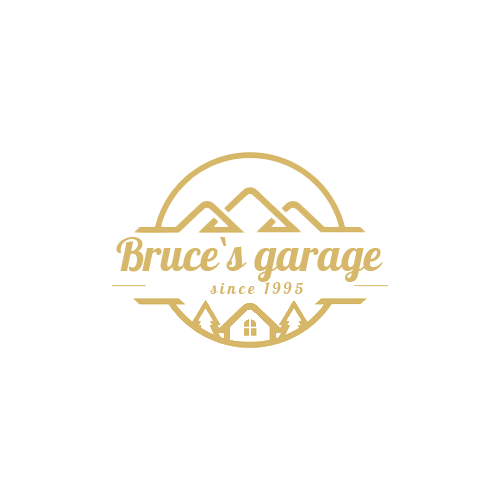
<style>
.page{position:relative;width:500px;height:500px;background:#ffffff}
.page>*{position:absolute;margin:0}
.t1{font:45px "Pattaya-Regular";color:#d7b86b}
.t2{font:16px "Pattaya-Regular";letter-spacing:0.2em;color:#d7b86b}
</style>
<div class="page">
<p class="t1" style="left:116px;top:237px;width:267px;height:45px">Bruce`s garage</p>
<p class="t2" style="left:210px;top:282px;width:93px;height:12px">since 1995</p>
</div>
